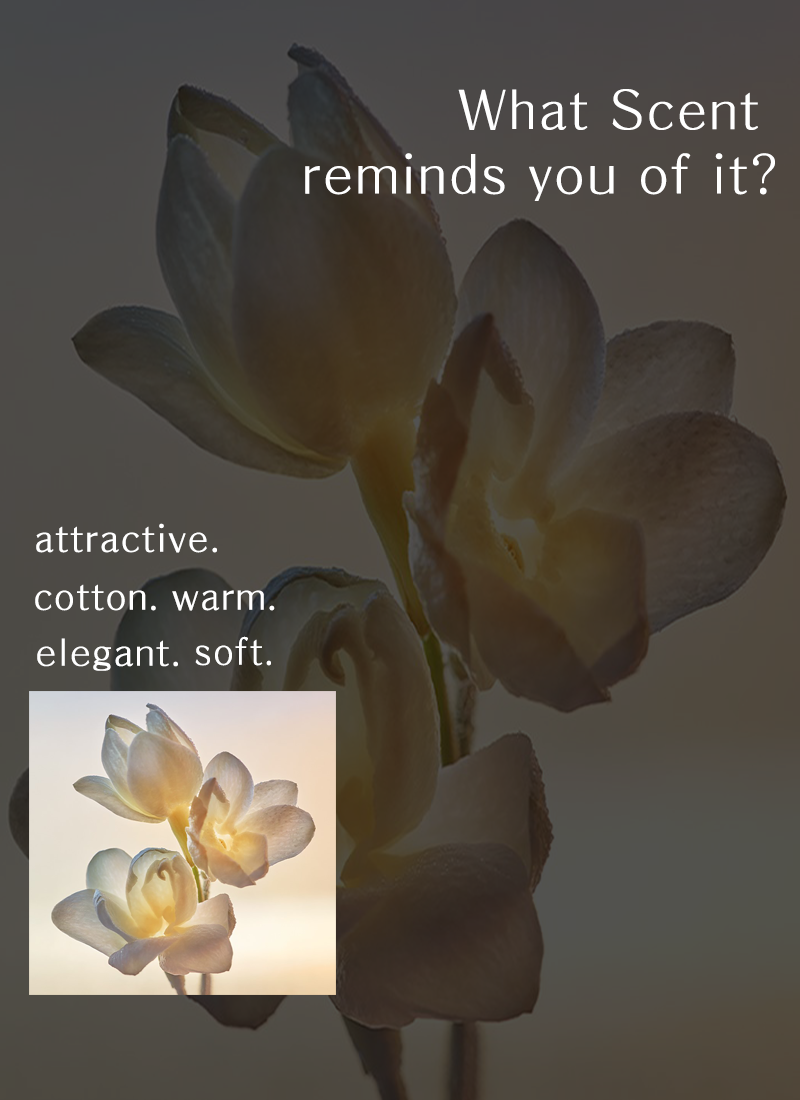
<style>
.page{position:relative;width:800px;height:1100px}
.page>*{position:absolute;margin:0}
.t1{font:53.3px/5.4px "H2gprM";color:#ffffff;font-weight:bold}
.t2{font:36.8px "H2gprM";color:#ffffff;font-weight:bold}
.t3{font:36.7px "H2gprM";color:#ffffff;font-weight:bold}
</style>
<div class="page">
<p class="t1" style="left:305px;top:89px;width:470px;height:112px;text-align:right">What Scent <br><br><br><br><br><br><br><br><br><br><br><br>reminds you of it?</p>
<p class="t2" style="left:36px;top:523px;width:181px;height:30px">attractive.</p>
<p class="t2" style="left:35px;top:584px;width:240px;height:27px">cotton. warm.</p>
<p class="t3" style="left:37px;top:638px;width:141px;height:33px">elegant.</p>
<p class="t2" style="left:195px;top:636px;width:76px;height:30px">soft.</p>
</div>
